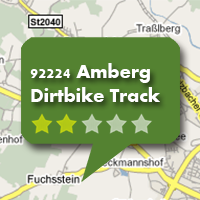
<style>
.page{position:relative;width:200px;height:200px;background:#548231}
.page>*{position:absolute;margin:0}
.t1{font:19.6px "Aharoni-Bold";color:#ffffff}
</style>
<div class="page">
<p class="t1" style="left:30px;top:63px;width:130px;height:39px">92224 Amberg<br>Dirtbike Track</p>
</div>
